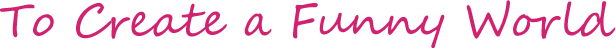
<style>
.page{position:relative;width:616px;height:48px;background:#ffffff}
.page>*{position:absolute;margin:0}
.t1{font:45.7px "SegoeScript";color:#d12270}
</style>
<div class="page">
<p class="t1" style="left:0px;top:0px;width:616px;height:48px">To Create a Funny World</p>
</div>
